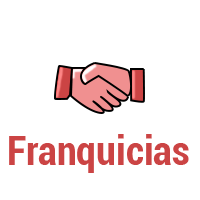
<style>
.page{position:relative;width:200px;height:200px;background:#ffffff}
.page>*{position:absolute;margin:0}
.t1{font:40px "Roboto-BoldCondensed";color:#cb4444}
</style>
<div class="page">
<p class="t1" style="left:9px;top:134px;width:180px;height:39px">Franquicias</p>
</div>
